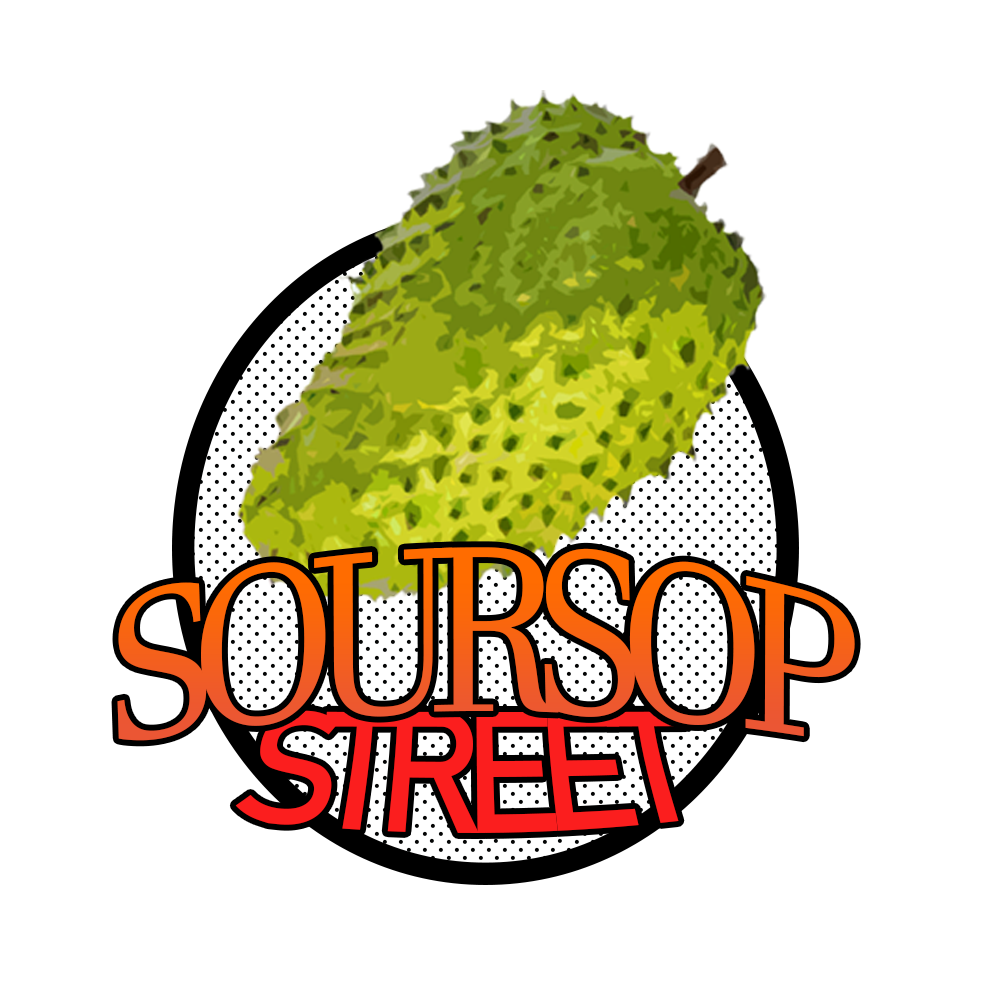
<style>
.page{position:relative;width:1000px;height:1000px;background:#ffffff}
.page>*{position:absolute;margin:0}
.t1{font:197.7px "JavaneseText";letter-spacing:-0.14em}
.t2{font:153.3px "Bahnschrift";letter-spacing:-0.14em;color:#fb1e1e}
</style>
<div class="page">
<p class="t1" style="left:117px;top:547px;width:738px;height:194px">SOURSOP</p>
<p class="t2" style="left:235px;top:710px;width:451px;height:123px">STREET</p>
</div>
